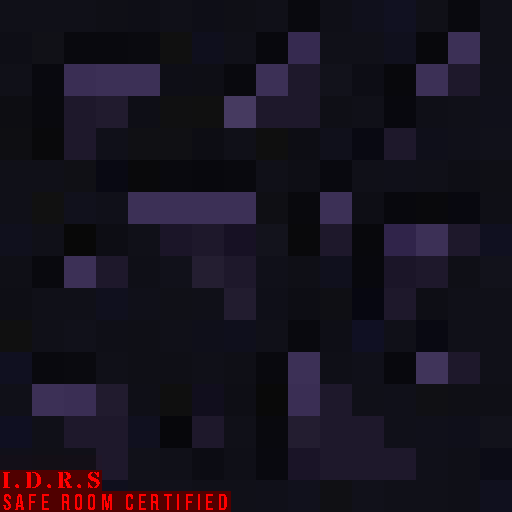
<style>
.page{position:relative;width:512px;height:512px}
.page>*{position:absolute;margin:0}
.t1{font:22.9px "StardosStencil-Bold";letter-spacing:0.18em;color:#ff0000}
.t2{font:22.9px "BebasNeue-Regular";letter-spacing:0.18em;color:#ff0000}
</style>
<div class="page">
<p class="t1" style="left:3px;top:472px;width:97px;height:16px">I.D.R.S</p>
<p class="t2" style="left:3px;top:494px;width:224px;height:16px">SAFE ROOM CERTIFIED</p>
</div>
